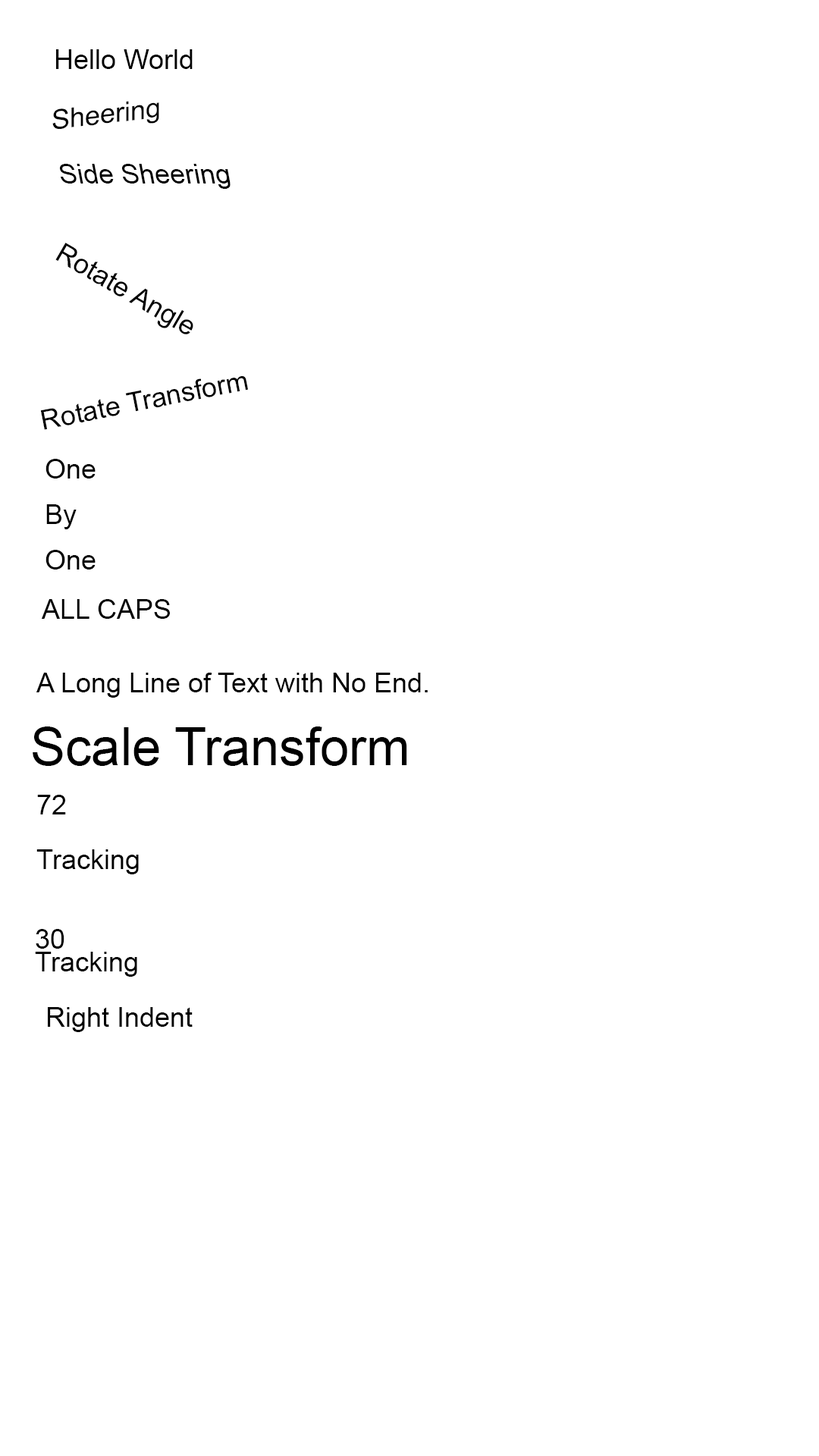
<style>
.page{position:relative;width:819px;height:1456px;background:#ffffff}
.page>*{position:absolute;margin:0}
.t1{font:27.3px "ArialMT";color:#000000}
.t2{font:27.8px "ArialMT";color:#000000}
.t3{font:27.3px/45.5px "ArialMT";color:#000000}
.t4{font:27.3px "ArialMT";color:#000000;text-transform:uppercase}
.t5{font:52.1px "ArialMT";color:#000000}
.t6{font:27.3px/54.6px "ArialMT";color:#000000}
.t7{font:27.3px/22.7px "ArialMT";color:#000000}
</style>
<div class="page">
<p class="t1" style="left:56px;top:49px;width:137px;height:20px">Hello World</p>
<p class="t1" style="left:52px;top:101px;width:107px;height:28px;rotate:-7deg">Sheering</p>
<p class="t2" style="left:60px;top:164px;width:171px;height:25px">Side Sheering</p>
<p class="t1" style="left:55px;top:243px;width:138px;height:91px;rotate:30deg">Rotate Angle</p>
<p class="t1" style="left:40px;top:376px;width:208px;height:54px;rotate:-11deg">Rotate Transform</p>
<p class="t3" style="left:45px;top:459px;width:51px;height:111px">One<br>By<br>One</p>
<p class="t4" style="left:42px;top:599px;width:128px;height:20px">All Caps</p>
<p class="t1" style="left:36px;top:673px;width:392px;height:25px">A Long Line of Text with No End.</p>
<p class="t5" style="left:33px;top:726px;width:374px;height:40px">Scale Transform</p>
<p class="t6" style="left:36px;top:795px;width:103px;height:79px">72<br>Tracking</p>
<p class="t7" style="left:35px;top:929px;width:102px;height:48px">30<br>Tracking</p>
<p class="t1" style="left:48px;top:1007px;width:145px;height:25px">Right Indent</p>
</div>
